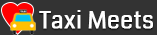
<style>
.page{position:relative;width:157px;height:35px;background:#333333}
.page>*{position:absolute;margin:0}
.t1{font:23px "Coda-Regular";color:#ffffff;font-weight:bold}
</style>
<div class="page">
<p class="t1" style="left:39px;top:10px;width:114px;height:19px">Taxi Meets</p>
</div>
